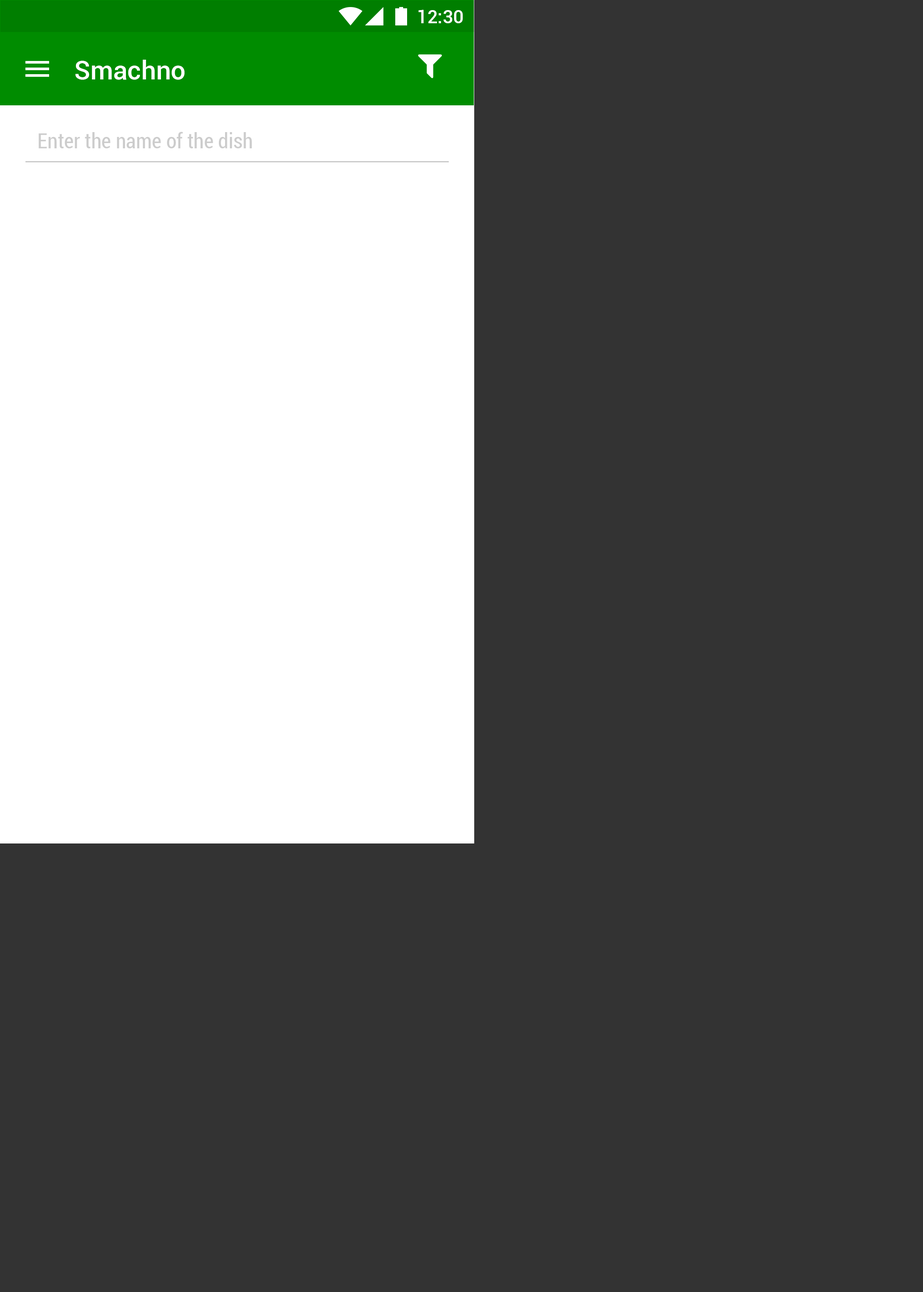
<style>
.page{position:relative;width:923px;height:1292px;background:#333333}
.page>*{position:absolute;margin:0}
.t1{font:18.4px "Roboto-Medium";color:#ffffff}
.t2{font:26.3px "Roboto-Medium";color:#ffffff}
.t3{font:21.1px "Roboto-Condensed";color:#cccccc}
</style>
<div class="page">
<p class="t1" style="left:419px;top:10px;width:44px;height:13px">12:30</p>
<p class="t2" style="left:75px;top:60px;width:110px;height:20px">Smachno</p>
<p class="t3" style="left:39px;top:132px;width:213px;height:16px">Enter the name of the dish</p>
</div>
